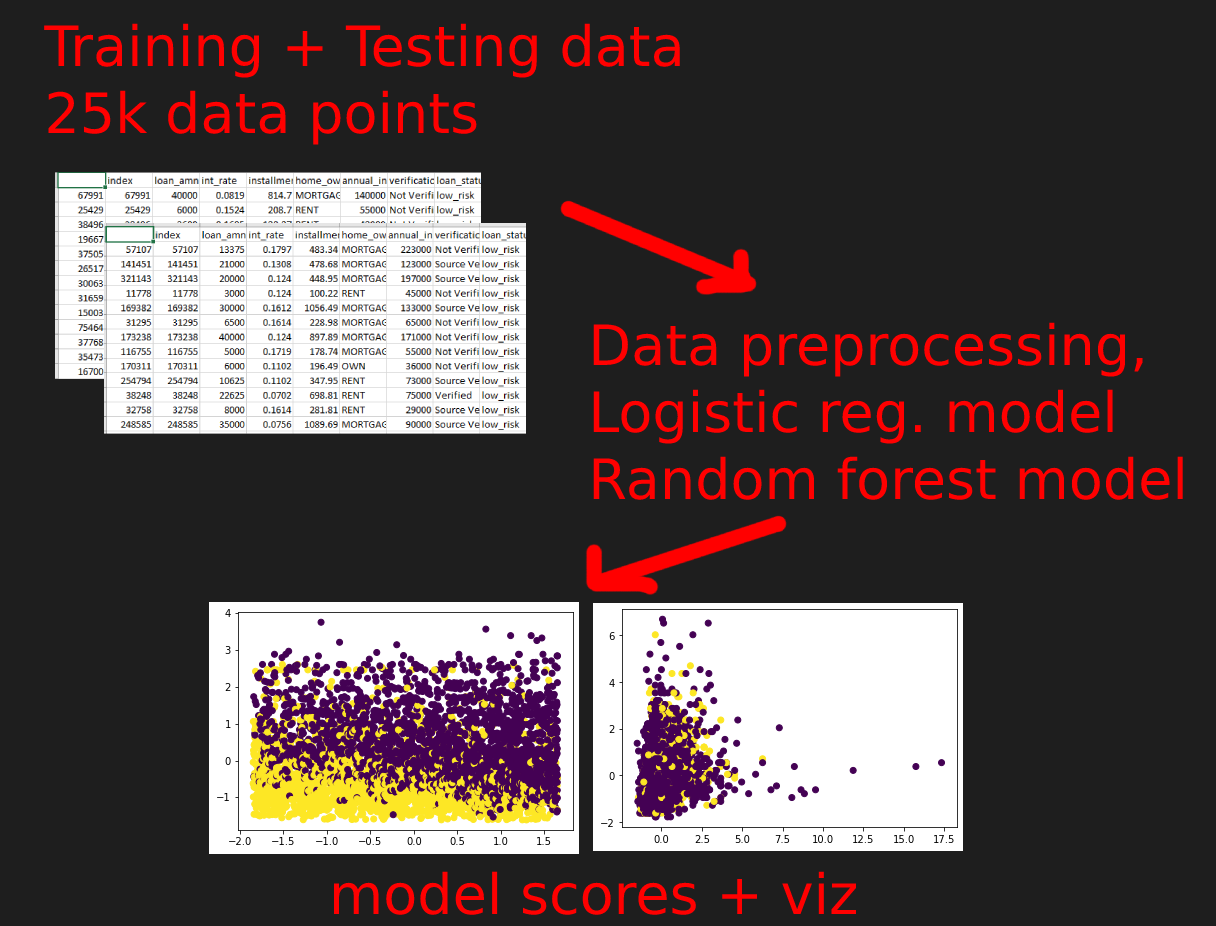
<style>
.page{position:relative;width:1216px;height:926px;background:#1e1e1e}
.page>*{position:absolute;margin:0}
.t1{font:55.7px "DejaVuSans";color:#ff0000}
</style>
<div class="page">
<p class="t1" style="left:44px;top:23px;width:636px;height:122px">Training + Testing data<br>25k data points</p>
<p class="t1" style="left:593px;top:322px;width:590px;height:178px">Data preprocessing,<br>Logistic reg. model<br>Random forest model</p>
<p class="t1" style="left:334px;top:871px;width:522px;height:44px">model scores + viz</p>
</div>
